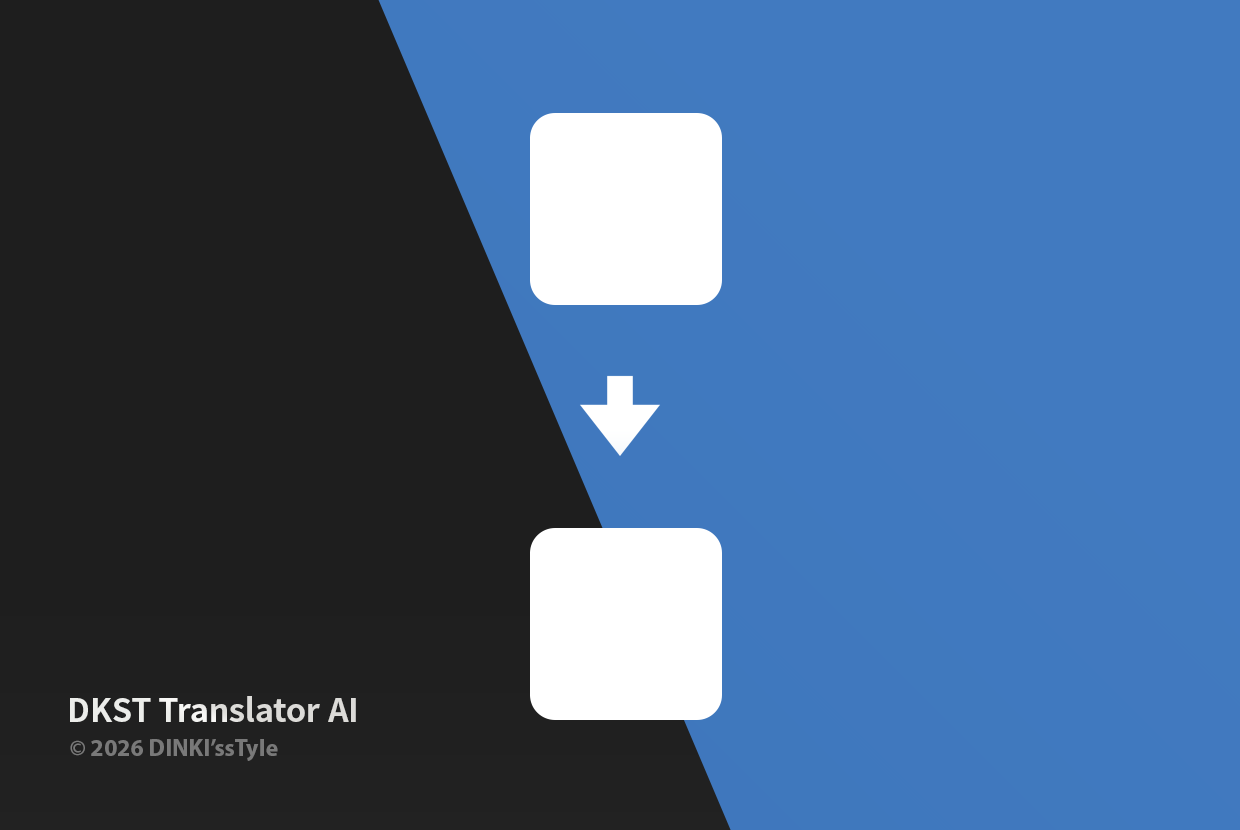
<style>
.page{position:relative;width:1240px;height:830px;background:#1e1e1e}
.page>*{position:absolute;margin:0}
.t1{font:32.1px "NotoSansCJKkr-Bold";color:#ecedea}
.t2{font:24px "MyriadPro-Bold";color:#797979}
</style>
<div class="page">
<p class="t1" style="left:70px;top:696px;width:286px;height:26px">DKST Translator AI</p>
<p class="t2" style="left:70px;top:739px;width:208px;height:22px">© 2026 DINKI’ssTyle</p>
</div>
